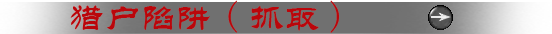
<style>
.page{position:relative;width:552px;height:34px;background:#707070}
.page>*{position:absolute;margin:0}
.t1{font:36px "STLiti";color:#ba060b}
.t2{font:36px "FangSong";color:#ba060b}
</style>
<div class="page">
<p class="t1" style="left:70px;top:0px;width:270px;height:33px">猎户陷阱<span class="t2">(</span>抓取<span class="t2">)</span></p>
</div>
